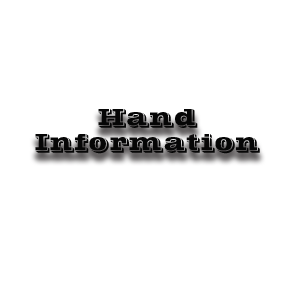
<style>
.page{position:relative;width:300px;height:300px;background:#ffffff}
.page>*{position:absolute;margin:0}
.t1{font:24px "POSTOFFICE";color:#060606}
</style>
<div class="page">
<p class="t1" style="left:98px;top:109px;width:100px;height:19px">Hand</p>
<p class="t1" style="left:35px;top:134px;width:225px;height:20px">Information</p>
</div>
